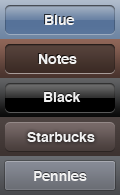
<style>
.page{position:relative;width:120px;height:195px}
.page>*{position:absolute;margin:0}
.t1{font:14px "Helvetica-Bold";color:#f1f1f1}
</style>
<div class="page">
<p class="t1" style="left:45px;top:15px;width:30px;height:10px">Blue</p>
<p class="t1" style="left:38px;top:54px;width:39px;height:10px">Notes</p>
<p class="t1" style="left:44px;top:92px;width:37px;height:10px">Black</p>
<p class="t1" style="left:27px;top:132px;width:68px;height:10px">Starbucks</p>
<p class="t1" style="left:34px;top:171px;width:53px;height:10px">Pennies</p>
</div>
